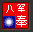
<style>
.page{position:relative;width:33px;height:32px;background:#f20000}
.page>*{position:absolute;margin:0}
.t1{font:10.4px "SimSun";color:#ffffff}
.t2{font:11.7px "SimSun";color:#ffffff}
</style>
<div class="page">
<p class="t1" style="left:6px;top:4px;width:19px;height:9px">八军</p>
<p class="t2" style="left:16px;top:15px;width:11px;height:12px">奉</p>
</div>
